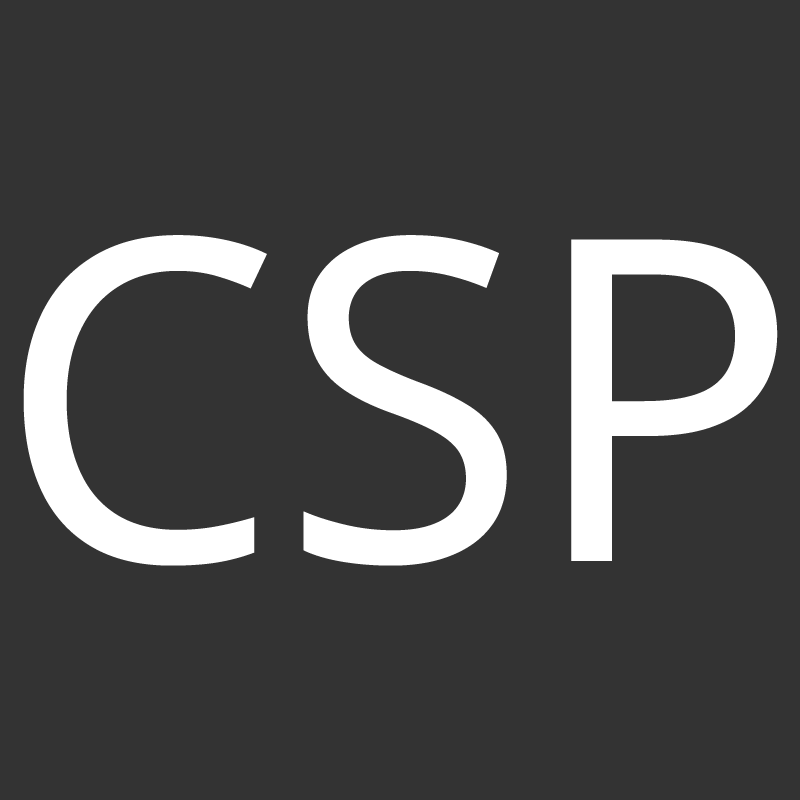
<style>
.page{position:relative;width:800px;height:800px;background:#333333}
.page>*{position:absolute;margin:0}
.t1{font:450px "NotoSansSymbols-Regular";color:#ffffff}
</style>
<div class="page">
<p class="t1" style="left:23px;top:235px;width:755px;height:331px">CSP</p>
</div>
